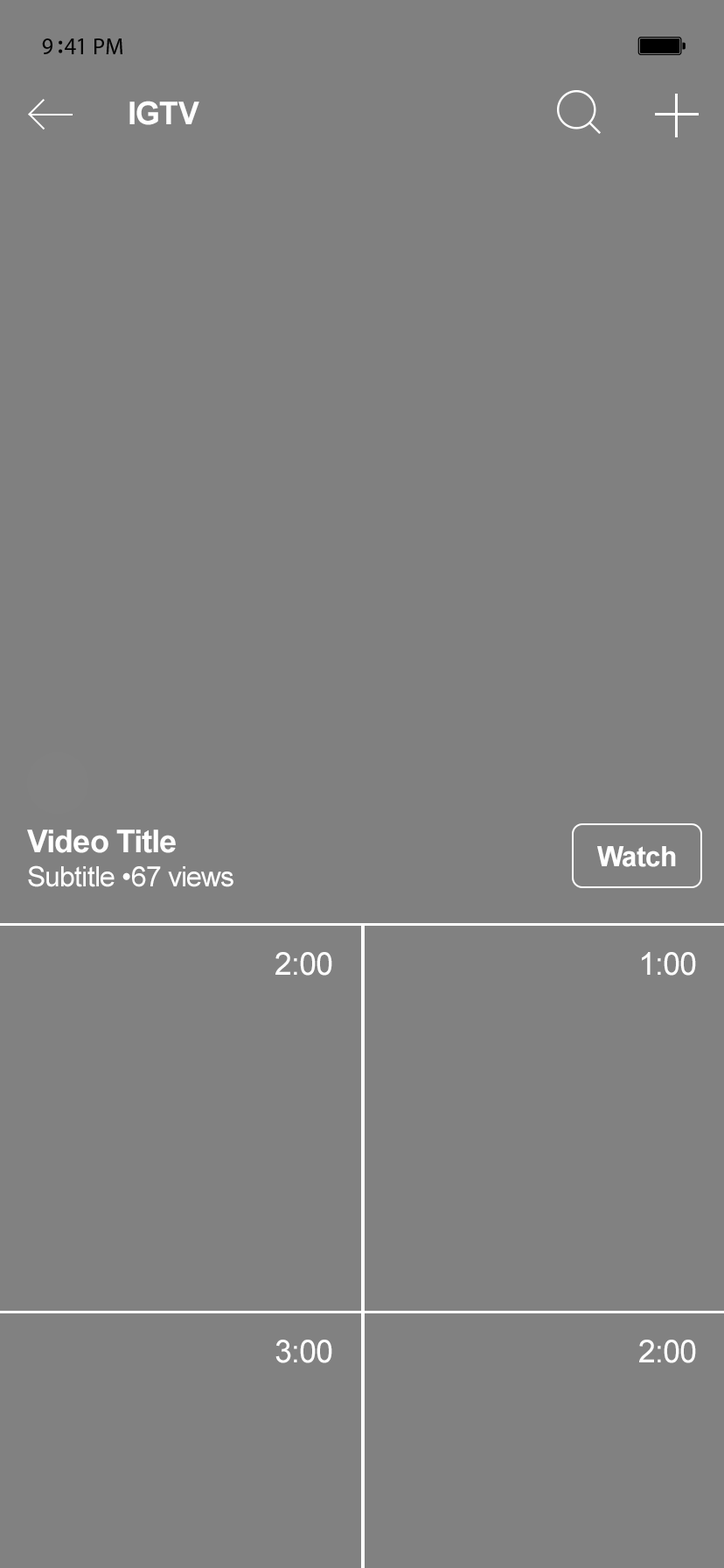
<style>
.page{position:relative;width:724px;height:1568px;background:#808080}
.page>*{position:absolute;margin:0}
.t1{font:31.5px "Arial-BoldMT";letter-spacing:-0.025em;color:#ffffff}
.t2{font:28px "ArialMT";letter-spacing:-0.025em;color:#ffffff}
.t3{font:28px "Arial-BoldMT";letter-spacing:-0.025em;color:#ffffff}
.t4{font:31.5px "ArialMT";letter-spacing:-0.025em;color:#ffffff}
</style>
<div class="page">
<p class="t1" style="left:130px;top:101px;width:70px;height:24px">IGTV</p>
<p class="t2" style="left:27px;top:830px;width:207px;height:57px"><span class="t1">Video Title<br></span>Subtitle •67 views</p>
<p class="t3" style="left:598px;top:846px;width:78px;height:21px">Watch</p>
<p class="t4" style="left:276px;top:952px;width:56px;height:24px">2:00</p>
<p class="t4" style="left:642px;top:952px;width:54px;height:24px">1:00</p>
<p class="t4" style="left:276px;top:1340px;width:56px;height:23px">3:00</p>
<p class="t4" style="left:640px;top:1340px;width:56px;height:23px">2:00</p>
</div>
